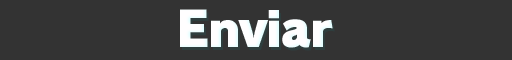
<style>
.page{position:relative;width:512px;height:60px;background:#333333}
.page>*{position:absolute;margin:0}
.t1{font:48px "RodinPro-UB";letter-spacing:-0.03em;color:#fffeff}
</style>
<div class="page">
<p class="t1" style="left:180px;top:9px;width:153px;height:39px">Enviar</p>
</div>
